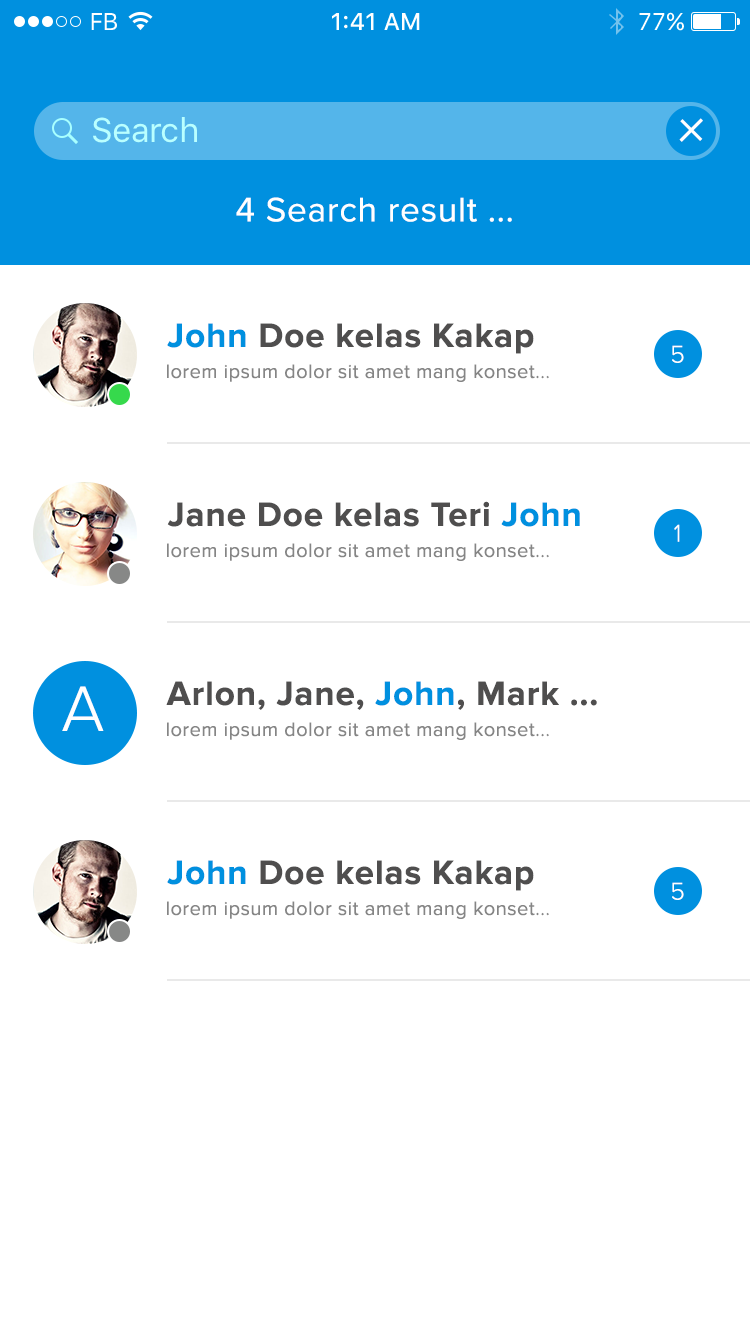
<style>
.page{position:relative;width:750px;height:1334px;background:#ffffff}
.page>*{position:absolute;margin:0}
.t1{font:24px "SFUIText-Regular";letter-spacing:-0.025em;color:#ffffff}
.t2{font:24px "SFUIText-Medium";color:#ffffff}
.t3{font:24px "SFUIText-Regular";color:#ffffff}
.t4{font:34px "SFUIText-Regular";letter-spacing:-0.024em;color:#b9ffff}
.t5{font:63px "ProximaNova-Light";letter-spacing:0.025em;color:#ffffff}
.t6{font:35px "ProximaNova-Regular";letter-spacing:0.025em;color:#ffffff}
.t7{font:35px "ProximaNova-Bold";letter-spacing:0.025em;color:#4f4e4e}
.t8{font:35px "ProximaNova-Bold";letter-spacing:0.025em;color:#0090df}
.t9{font:25px "ProximaNova-Light";letter-spacing:0.025em;color:#ffffff}
.t10{font:20px "ProximaNova-Regular";letter-spacing:0.025em;color:#858585}
.t11{font:66px "ProximaNova-Light";letter-spacing:0.025em;color:#ffffff}
</style>
<div class="page">
<p class="t1" style="left:91px;top:13px;width:26px;height:17px">FB</p>
<p class="t2" style="left:332px;top:13px;width:88px;height:17px">1:41 AM</p>
<p class="t3" style="left:639px;top:12px;width:45px;height:19px">77%</p>
<p class="t4" style="left:93px;top:117px;width:104px;height:26px">Search</p>
<p class="t5" style="left:679px;top:118px;width:24px;height:24px;rotate:45deg">+</p>
<p class="t6" style="left:236px;top:197px;width:276px;height:25px">4 Search result ...</p>
<p class="t7" style="left:167px;top:323px;width:367px;height:31px"><span class="t8">John</span> Doe kelas Kakap</p>
<p class="t9" style="left:672px;top:345px;width:12px;height:18px">5</p>
<p class="t10" style="left:167px;top:364px;width:382px;height:18px">lorem ipsum dolor sit amet mang konset...</p>
<p class="t7" style="left:167px;top:501px;width:413px;height:26px">Jane Doe kelas Teri <span class="t8">John</span></p>
<p class="t9" style="left:674px;top:524px;width:6px;height:18px">1</p>
<p class="t10" style="left:167px;top:543px;width:382px;height:18px">lorem ipsum dolor sit amet mang konset...</p>
<p class="t11" style="left:62px;top:686px;width:42px;height:45px">A</p>
<p class="t7" style="left:166px;top:681px;width:431px;height:29px">Arlon, Jane, <span class="t8">John</span>, Mark ...</p>
<p class="t10" style="left:167px;top:722px;width:382px;height:18px">lorem ipsum dolor sit amet mang konset...</p>
<p class="t7" style="left:167px;top:860px;width:367px;height:31px"><span class="t8">John </span>Doe kelas Kakap</p>
<p class="t9" style="left:672px;top:882px;width:12px;height:18px">5</p>
<p class="t10" style="left:167px;top:901px;width:382px;height:18px">lorem ipsum dolor sit amet mang konset...</p>
</div>
